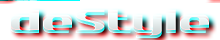
<style>
.page{position:relative;width:220px;height:40px;background:#ffffff}
.page>*{position:absolute;margin:0}
.t1{font:36px "SFQuartziteExtended";color:#f0f1f1}
</style>
<div class="page">
<p class="t1" style="left:10px;top:9px;width:199px;height:26px">deStyle</p>
</div>
